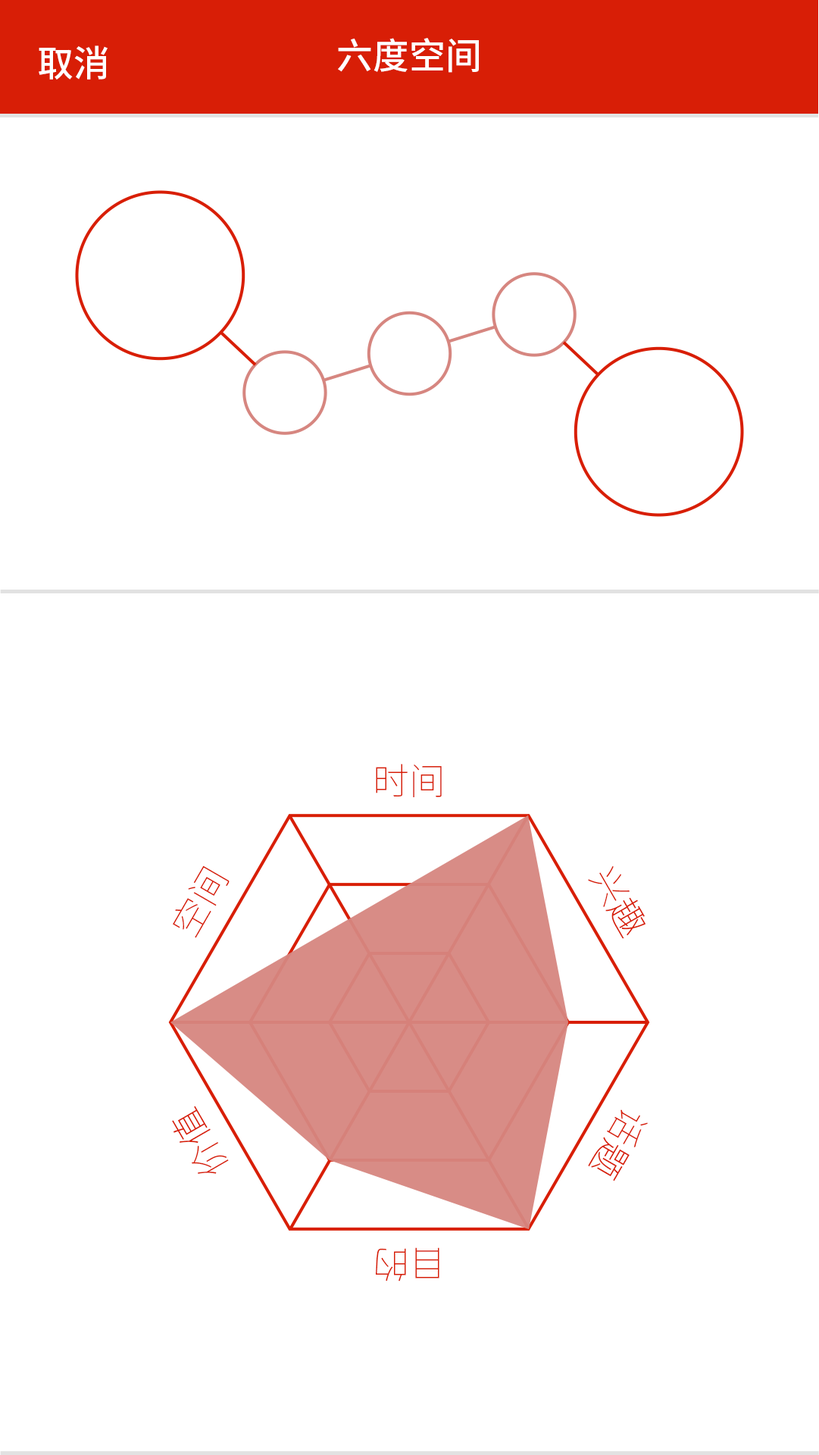
<style>
.page{position:relative;width:819px;height:1455px;background:#ffffff}
.page>*{position:absolute;margin:0}
.t1{font:36.4px "SourceHanSansCN-Medium";color:#ffffff}
.t2{font:36.4px "SourceHanSansCN-ExtraLight";color:#d81e06}
</style>
<div class="page">
<p class="t1" style="left:338px;top:38px;width:141px;height:35px">六度空间</p>
<p class="t1" style="left:39px;top:45px;width:69px;height:35px">取消</p>
<p class="t2" style="left:376px;top:764px;width:66px;height:33px">时间</p>
<p class="t2" style="left:173px;top:866px;width:57px;height:72px">空间</p>
<p class="t2" style="left:588px;top:866px;width:58px;height:73px">兴趣</p>
<p class="t2" style="left:172px;top:1106px;width:57px;height:68px">价值</p>
<p class="t2" style="left:588px;top:1110px;width:60px;height:72px">话题</p>
<p class="t2" style="left:376px;top:1248px;width:64px;height:34px">目的</p>
</div>
